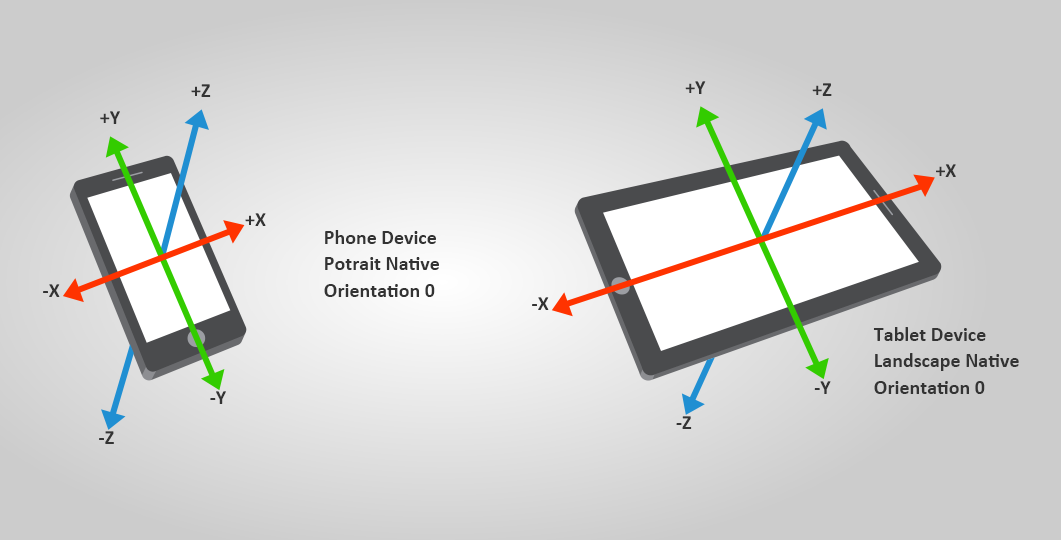
<style>
.page{position:relative;width:1061px;height:540px;background:#cccccc}
.page>*{position:absolute;margin:0}
.t1{font:20px "Calibri-Bold";color:#333333}
.t2{font:20px/26.4px "Calibri-Bold";color:#333333}
</style>
<div class="page">
<p class="t1" style="left:191px;top:84px;width:20px;height:13px">+Z</p>
<p class="t1" style="left:685px;top:81px;width:21px;height:13px">+Y</p>
<p class="t1" style="left:812px;top:83px;width:20px;height:13px">+Z</p>
<p class="t1" style="left:100px;top:111px;width:20px;height:13px">+Y</p>
<p class="t1" style="left:936px;top:164px;width:20px;height:13px">+X</p>
<p class="t1" style="left:245px;top:213px;width:21px;height:13px">+X</p>
<p class="t2" style="left:324px;top:230px;width:115px;height:67px">Phone Device<br>Potrait Native<br>Orientation 0</p>
<p class="t1" style="left:43px;top:284px;width:17px;height:13px">-X</p>
<p class="t1" style="left:532px;top:297px;width:17px;height:13px">-X</p>
<p class="t2" style="left:873px;top:327px;width:146px;height:67px">Tablet Device<br>Landscape Native<br>Orientation 0</p>
<p class="t1" style="left:814px;top:381px;width:17px;height:13px">-Y</p>
<p class="t1" style="left:210px;top:391px;width:16px;height:13px">-Y</p>
<p class="t1" style="left:676px;top:416px;width:16px;height:13px">-Z</p>
<p class="t1" style="left:99px;top:431px;width:15px;height:13px">-Z</p>
</div>
